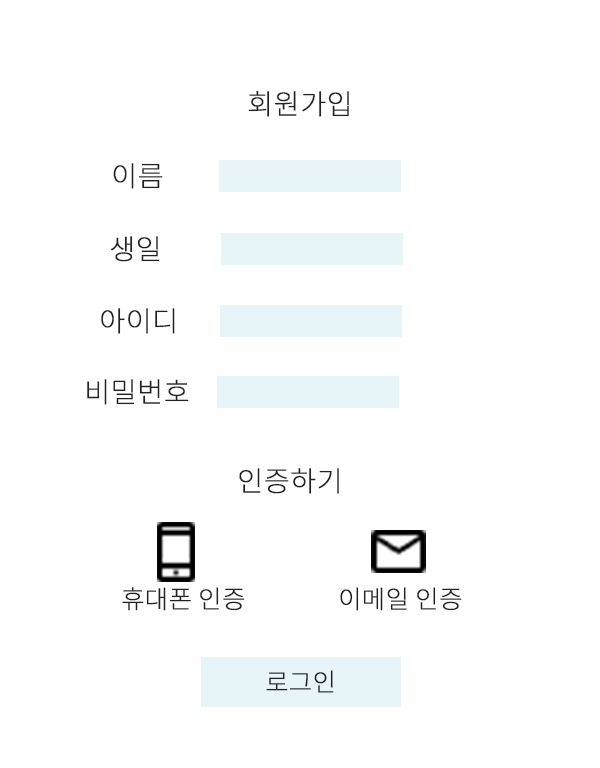
<style>
.page{position:relative;width:600px;height:768px;background:#ffffff}
.page>*{position:absolute;margin:0}
.t1{font:28px "NotoSansKR-Thin";color:#222222;font-weight:bold}
.t2{font:25px "NotoSansKR-Thin";color:#222222;font-weight:bold}
</style>
<div class="page">
<p class="t1" style="left:248px;top:90px;width:101px;height:27px">회원가입</p>
<p class="t1" style="left:113px;top:163px;width:50px;height:26px">이름</p>
<p class="t1" style="left:111px;top:236px;width:49px;height:26px">생일</p>
<p class="t1" style="left:101px;top:308px;width:74px;height:26px">아이디</p>
<p class="t1" style="left:87px;top:379px;width:102px;height:26px">비밀번호</p>
<p class="t1" style="left:239px;top:468px;width:100px;height:26px">인증하기</p>
<p class="t2" style="left:122px;top:587px;width:123px;height:24px">휴대폰 인증</p>
<p class="t2" style="left:340px;top:587px;width:122px;height:24px">이메일 인증</p>
<p class="t2" style="left:266px;top:670px;width:68px;height:23px">로그인</p>
</div>
